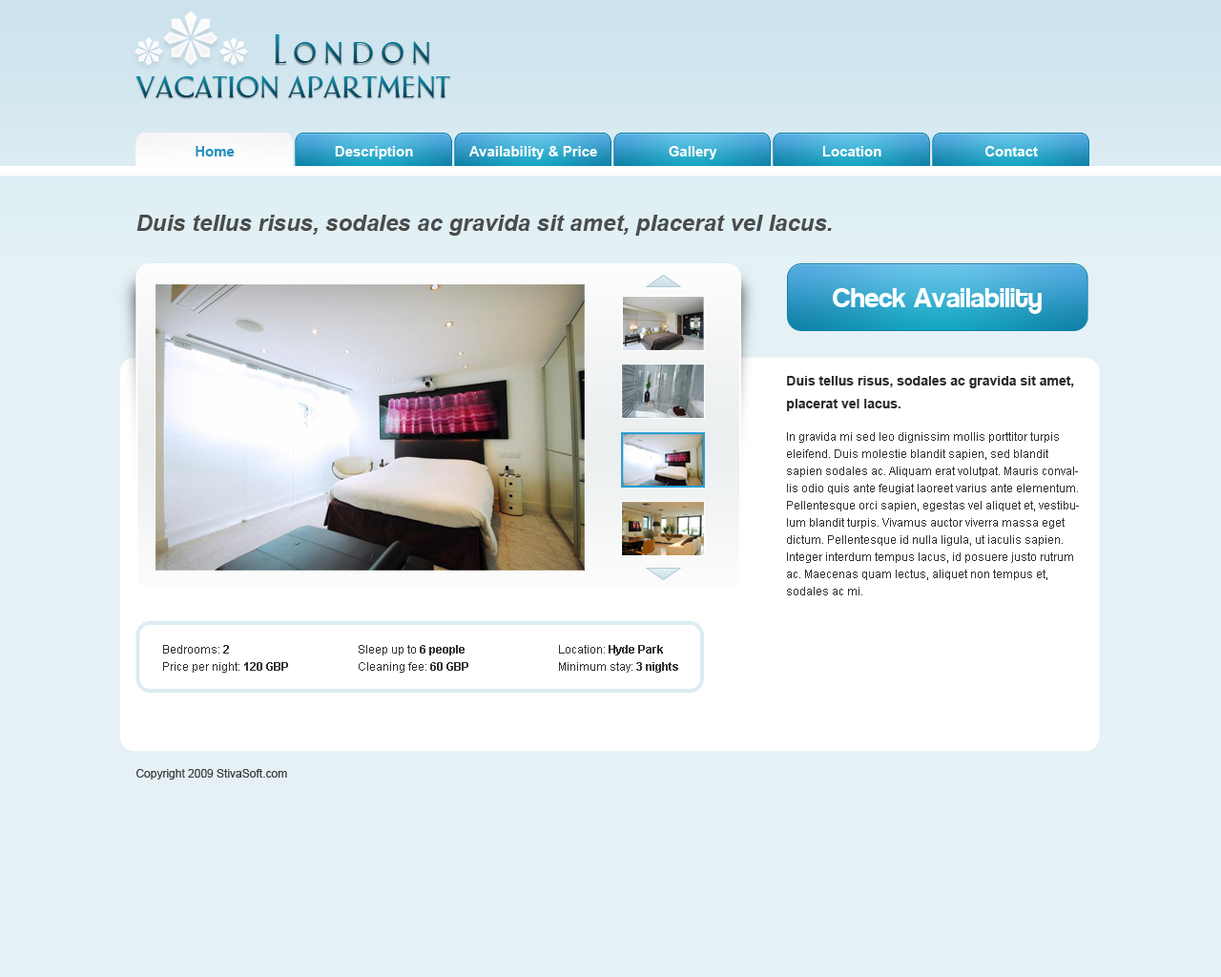
<style>
.page{position:relative;width:1221px;height:977px;background:#e5f1f5}
.page>*{position:absolute;margin:0}
.t1{font:34.3px "AphasiaBT-Roman";letter-spacing:0.2em}
.t2{font:34.3px "AphasiaBT-Roman"}
.t3{font:14.3px "Arial-BoldMT";color:#2690ba}
.t4{font:14.3px "Arial-BoldMT";color:#ffffff}
.t5{font:22.9px "Arial-BoldItalicMT";color:#4a4c4c}
.t6{font:26.7px "Coolvetica";color:#ffffff}
.t7{font:13.4px/22.9px "Arial-BoldMT";color:#292b2b}
.t8{font:11.4px/17.2px "ArialMT";color:#323232}
.t9{font:11.4px/17.2px "Arial-BoldMT";color:#323232}
.t10{font:11.4px "ArialMT";color:#393d3d}
</style>
<div class="page">
<p class="t1" style="left:275px;top:34px;width:154px;height:30px">London</p>
<p class="t2" style="left:135px;top:75px;width:315px;height:23px">vacation apartment</p>
<p class="t3" style="left:196px;top:146px;width:39px;height:10px">Home</p>
<p class="t4" style="left:335px;top:146px;width:78px;height:13px">Description</p>
<p class="t4" style="left:468px;top:146px;width:129px;height:13px">Availability &amp; Price</p>
<p class="t4" style="left:669px;top:146px;width:48px;height:13px">Gallery</p>
<p class="t4" style="left:822px;top:146px;width:59px;height:10px">Location</p>
<p class="t4" style="left:984px;top:146px;width:54px;height:10px">Contact</p>
<p class="t5" style="left:136px;top:215px;width:696px;height:21px">Duis tellus risus, sodales ac gravida sit amet, placerat vel lacus.</p>
<p class="t6" style="left:833px;top:288px;width:209px;height:26px">Check Availability</p>
<p class="t7" style="left:787px;top:376px;width:287px;height:35px">Duis tellus risus, sodales ac gravida sit amet, <br>placerat vel lacus.</p>
<p class="t8" style="left:787px;top:432px;width:292px;height:163px">In gravida mi sed leo dignissim mollis porttitor turpis eleifend. Duis molestie blandit sapien, sed blandit sapien sodales ac. Aliquam erat volutpat. Mauris convallis odio quis ante feugiat laoreet varius ante elementum. Pellentesque orci sapien, egestas vel aliquet et, vestibulum blandit turpis. Vivamus auctor viverra massa eget dictum. Pellentesque id nulla ligula, ut iaculis sapien. Integer interdum tempus lacus, id posuere justo rutrum ac. Maecenas quam lectus, aliquet non tempus et, sodales ac mi.</p>
<p class="t8" style="left:163px;top:645px;width:125px;height:27px">Bedrooms: <span class="t9">2<br></span>Price per night: <span class="t9">120 GBP</span></p>
<p class="t8" style="left:359px;top:645px;width:109px;height:27px">Sleep up to <span class="t9">6 people<br></span>Cleaning fee:<span class="t9"> 60 GBP</span></p>
<p class="t8" style="left:559px;top:645px;width:119px;height:27px">Location: <span class="t9">Hyde Park<br></span>Minimum stay: <span class="t9">3 nights</span></p>
<p class="t10" style="left:136px;top:769px;width:151px;height:10px">Copyright 2009 StivaSoft.com</p>
</div>
